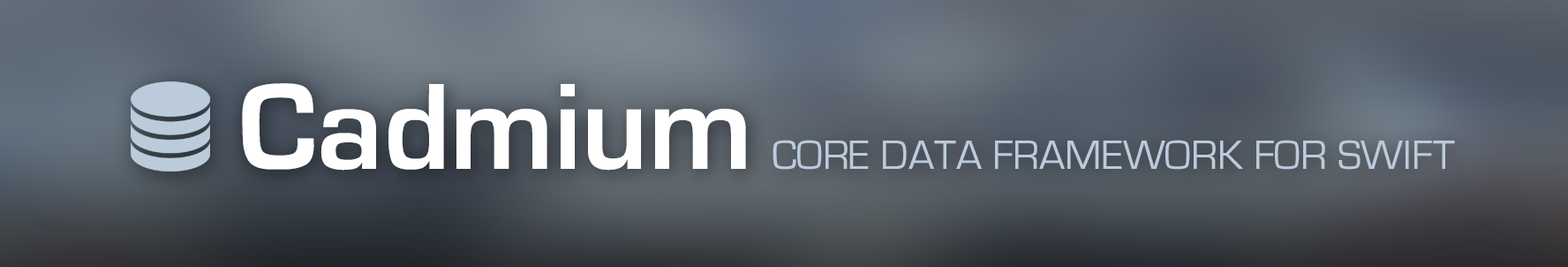
<style>
.page{position:relative;width:1568px;height:267px}
.page>*{position:absolute;margin:0}
.t1{font:127.1px "Eurostile-Bold";color:#ffffff}
.t2{font:42.4px "EurostileRegular";color:#bbcbdc;text-transform:uppercase}
</style>
<div class="page">
<p class="t1" style="left:242px;top:83px;width:504px;height:87px">Cadmium</p>
<p class="t2" style="left:773px;top:139px;width:682px;height:31px">Core Data Framework FOR SWIFT</p>
</div>
